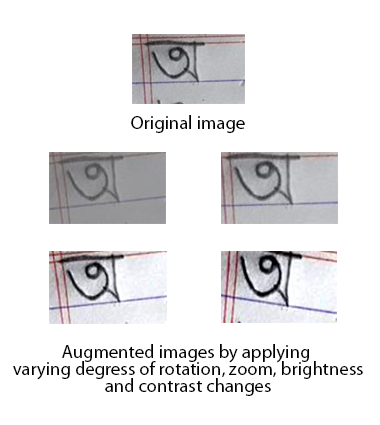
<style>
.page{position:relative;width:380px;height:425px;background:#ffffff}
.page>*{position:absolute;margin:0}
.t1{font:18.7px "MyriadPro-Regular";color:#000000}
.t2{font:18.7px/17.3px "MyriadPro-Regular";color:#000000}
</style>
<div class="page">
<p class="t1" style="left:131px;top:115px;width:114px;height:18px">Original image</p>
<p class="t2" style="left:13px;top:344px;width:350px;height:52px;text-align:center">Augmented images by applying <br>varying degress of rotation, zoom, brightness<br>and contrast changes</p>
</div>
